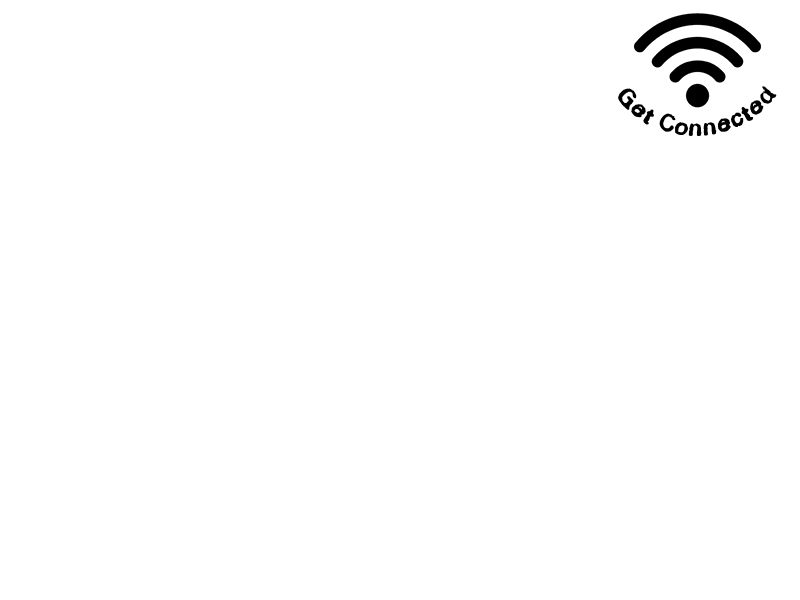
<style>
.page{position:relative;width:800px;height:600px;background:#ffffff}
.page>*{position:absolute;margin:0}
.t1{font:21.5px "Inkbleed";color:#000000}
</style>
<div class="page">
<p class="t1" style="left:618px;top:85px;width:159px;height:51px;text-align:right">Get Connected</p>
</div>
